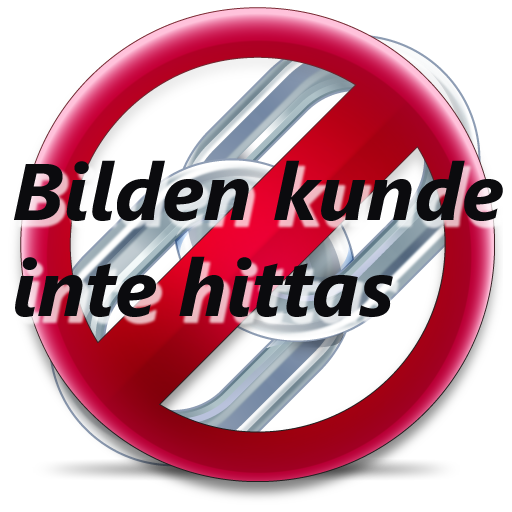
<style>
.page{position:relative;width:512px;height:512px;background:#ffffff}
.page>*{position:absolute;margin:0}
.t1{font:80px "SegoeUI-BoldItalic";color:#0b0b0e}
</style>
<div class="page">
<p class="t1" style="left:14px;top:160px;width:489px;height:157px">Bilden kunde<br>inte hittas</p>
</div>
